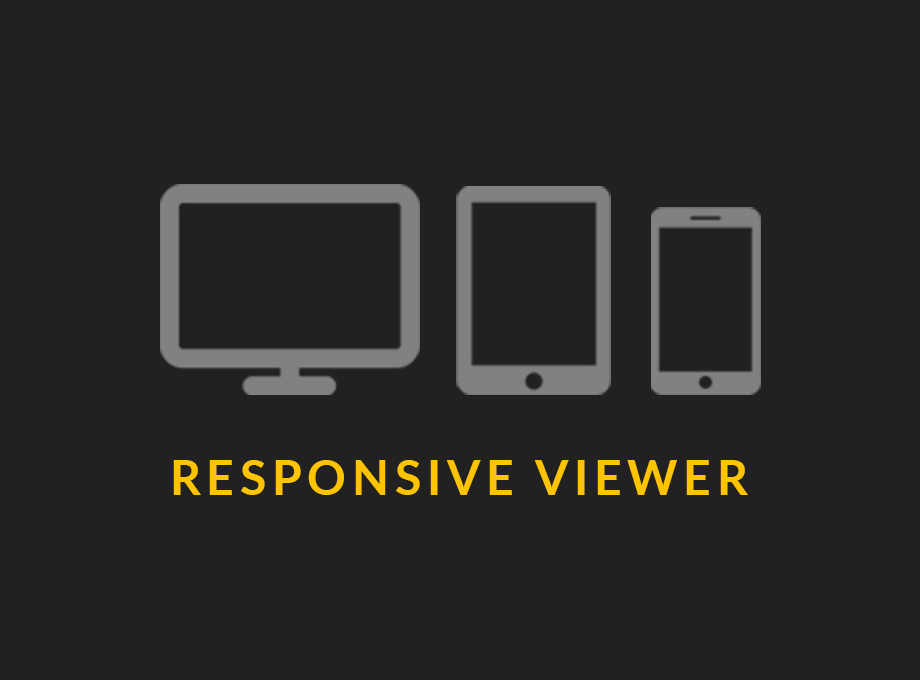
<style>
.page{position:relative;width:920px;height:680px;background:#212121}
.page>*{position:absolute;margin:0}
.t1{font:48px "Lato-Bold";letter-spacing:0.12em;color:#ffc400;text-transform:uppercase}
</style>
<div class="page">
<p class="t1" style="left:173px;top:460px;width:575px;height:35px">Responsive Viewer</p>
</div>
